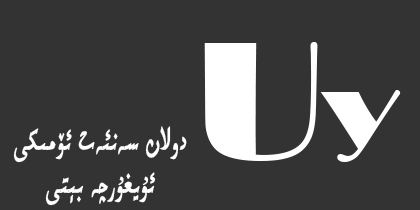
<style>
.page{position:relative;width:420px;height:210px;background:#333333}
.page>*{position:absolute;margin:0}
.t1{font:172.6px "Broadway";color:#ffffff}
.t2{font:122.7px "Broadway";color:#ffffff}
.t3{font:36px "UKIJKesmeTuz";color:#ffffff;font-weight:bold;scale:0.71 1}
</style>
<div class="page">
<p class="t1" style="left:204px;top:42px;width:197px;height:120px">U<span class="t2">y</span></p>
<p class="t3" style="left:13px;top:126px;width:174px;height:80px;text-align:center">دولان سەنئەت ئۆمىكى<br>ئۇيغۇرچە بېتى</p>
</div>
